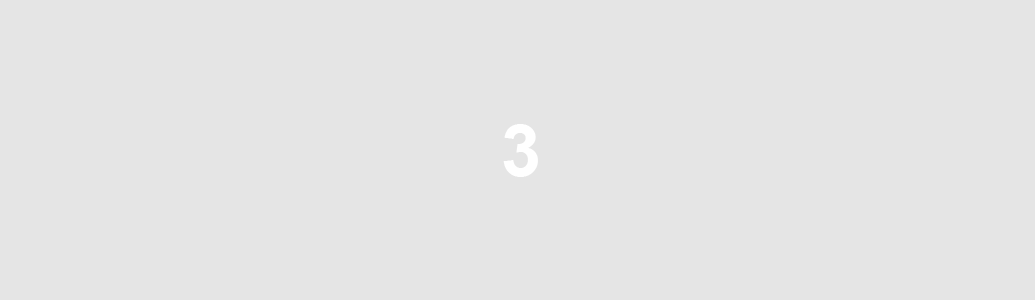
<style>
.page{position:relative;width:1035px;height:300px;background:#e5e5e5}
.page>*{position:absolute;margin:0}
.t1{font:72px "Arial-BoldMT";letter-spacing:0.025em;color:#ffffff}
</style>
<div class="page">
<p class="t1" style="left:503px;top:124px;width:35px;height:53px">3</p>
</div>
